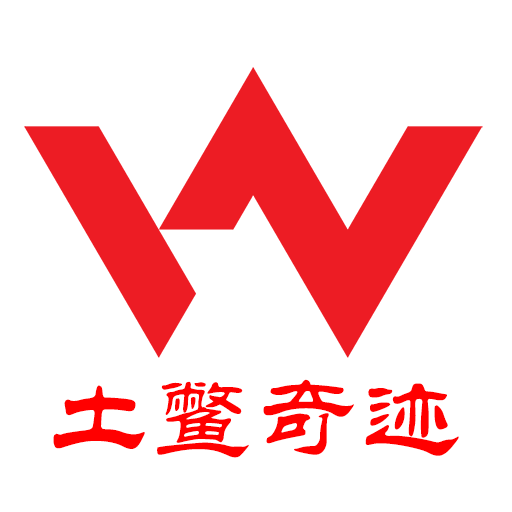
<style>
.page{position:relative;width:512px;height:512px;background:#ffffff}
.page>*{position:absolute;margin:0}
.t1{font:104.3px "STLiti";color:#ff0000}
</style>
<div class="page">
<p class="t1" style="left:53px;top:379px;width:406px;height:79px">土鳖奇迹</p>
</div>
